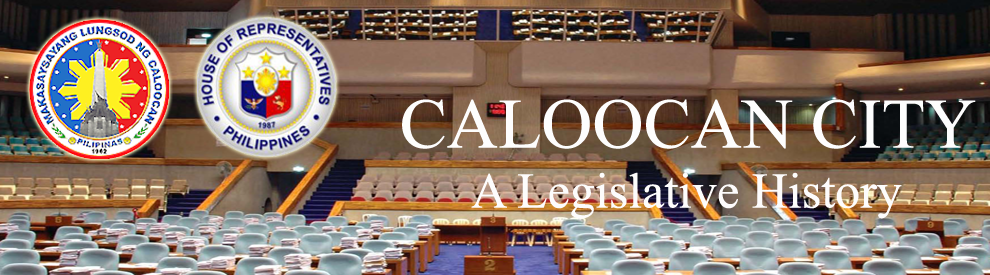
<style>
.page{position:relative;width:990px;height:275px}
.page>*{position:absolute;margin:0}
.t1{font:50px "TimesNewRomanPSMT";color:#fdfcfc}
.t2{font:70.8px "TimesNewRomanPSMT";color:#fdfdfd}
</style>
<div class="page">
<p class="t1" style="left:402px;top:99px;width:574px;height:120px;text-align:center"><span class="t2">CALOOCAN CITY<br></span>A Legislative History</p>
</div>
